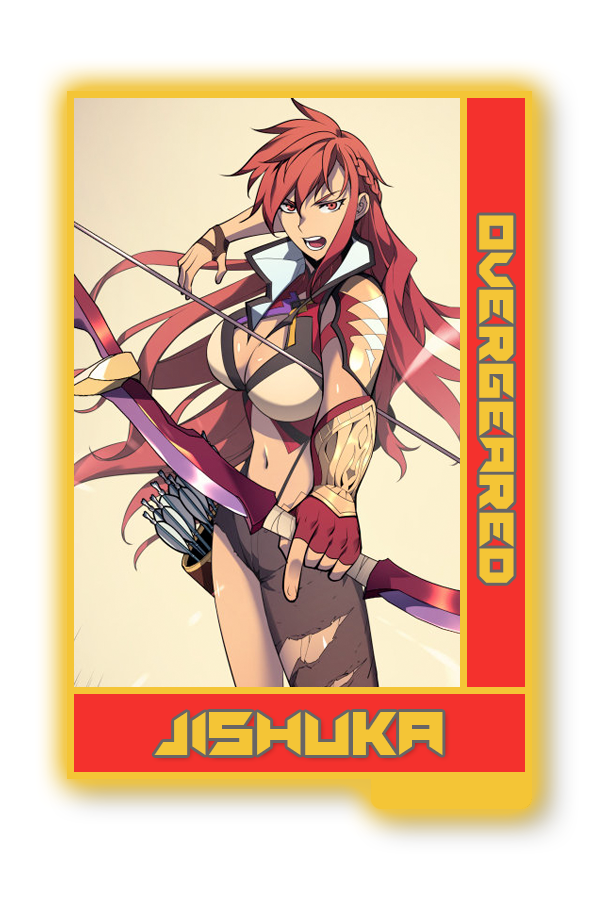
<style>
.page{position:relative;width:600px;height:900px;background:#ffffff}
.page>*{position:absolute;margin:0}
.t1{font:48.8px "Suggested-Regular";color:#f4c536}
.t2{font:62.5px "Suggested-Regular";color:#f4c536}
</style>
<div class="page">
<p class="t1" style="left:479px;top:215px;width:35px;height:368px;rotate:90deg">OVERGEARED</p>
<p class="t2" style="left:154px;top:712px;width:289px;height:43px">JISHUKA</p>
</div>
